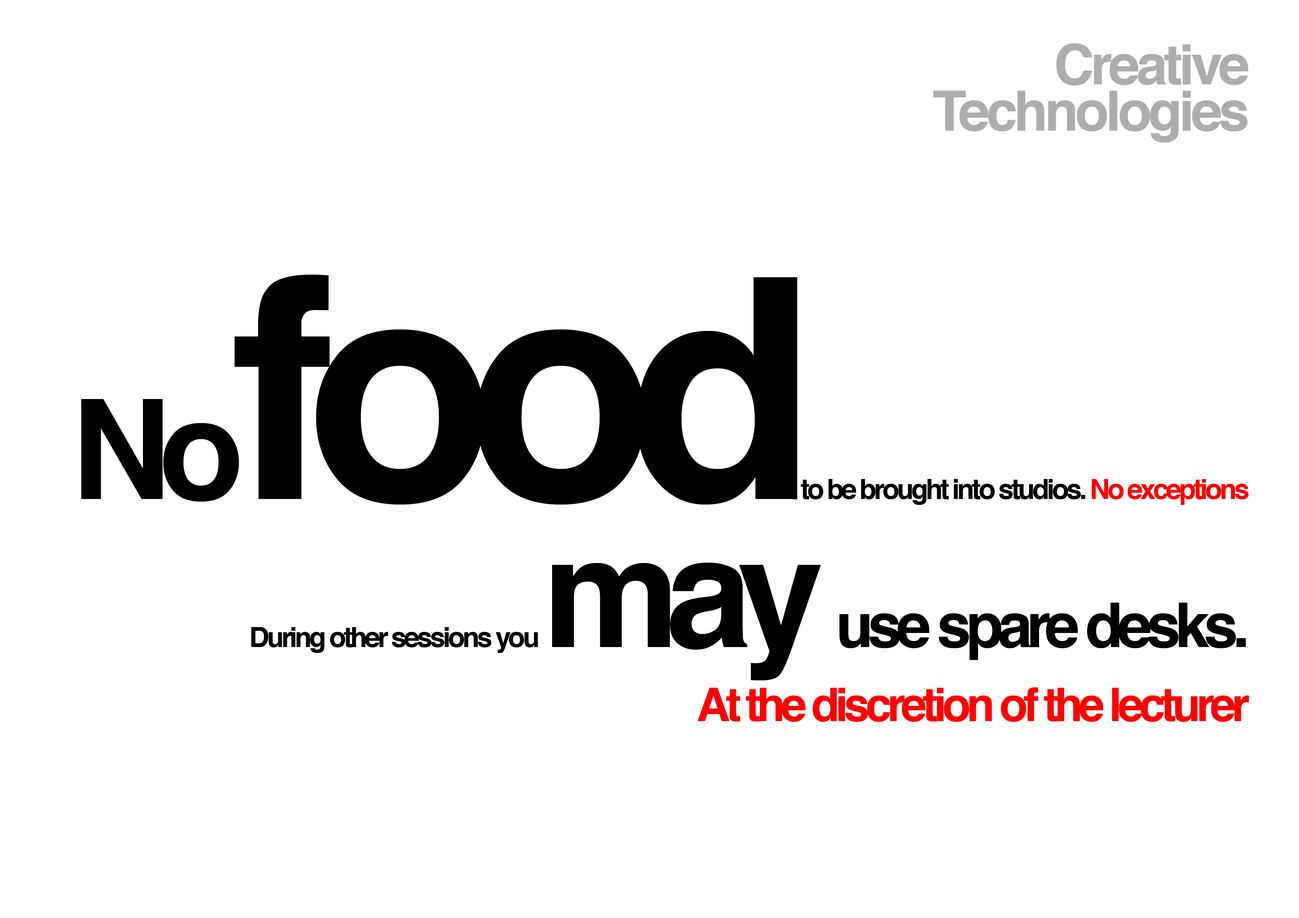
<style>
.page{position:relative;width:1299px;height:918px;background:#ffffff}
.page>*{position:absolute;margin:0}
.t1{font:55.5px/46.3px "Helvetica-Bold";letter-spacing:-0.06em;color:#adadad}
.t2{font:46.3px/74px "Helvetica-Bold";letter-spacing:-0.09em;color:#ff0000}
.t3{font:138.8px/74px "Helvetica-Bold";letter-spacing:-0.09em;color:#000000}
.t4{font:308.5px/74px "Helvetica-Bold";letter-spacing:-0.09em;color:#000000}
.t5{font:27.8px/74px "Helvetica-Bold";letter-spacing:-0.09em;color:#000000}
.t6{font:27.8px/74px "Helvetica-Bold";letter-spacing:-0.09em;color:#ff0000}
.t7{font:27.8px/37px "Helvetica-Bold";letter-spacing:-0.09em;color:#000000}
.t8{font:154.3px/37px "Helvetica-Bold";letter-spacing:-0.09em;color:#000000}
.t9{font:61.7px/37px "Helvetica-Bold";letter-spacing:-0.09em;color:#000000}
</style>
<div class="page">
<p class="t1" style="left:933px;top:43px;width:315px;height:100px;text-align:right">Creative<br>Technologies</p>
<p class="t2" style="left:81px;top:275px;width:1168px;height:447px;text-align:right"><span class="t3">No</span><span class="t4">food</span><span class="t5">t to be brought into studios. </span><span class="t6">No exceptions<br><br></span><span class="t7"><br>During other sessions you </span><span class="t8">may </span><span class="t9">use spare desks.<br></span>At the discretion of the lecturer</p>
</div>
